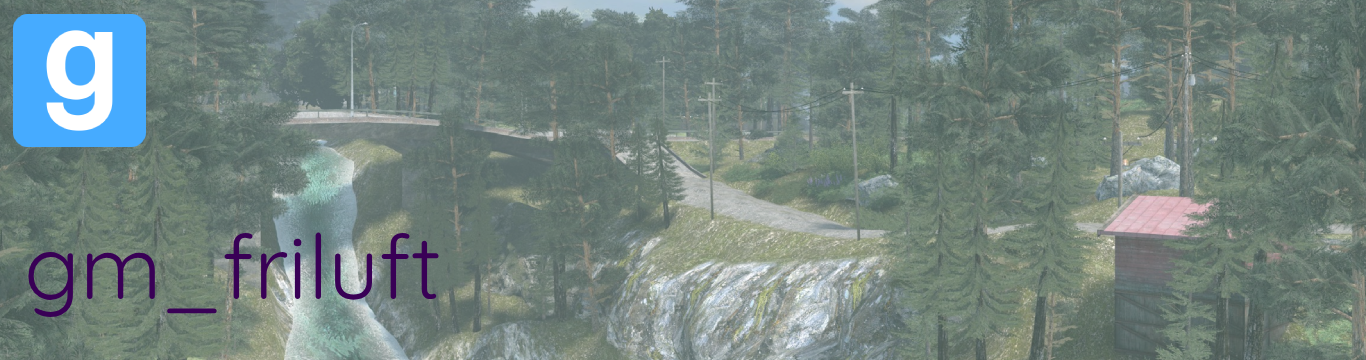
<style>
.page{position:relative;width:1366px;height:360px}
.page>*{position:absolute;margin:0}
.t1{font:89.7px "Quicksand-Regular";color:#390056}
</style>
<div class="page">
<p class="t1" style="left:28px;top:232px;width:411px;height:85px">gm_friluft</p>
</div>
